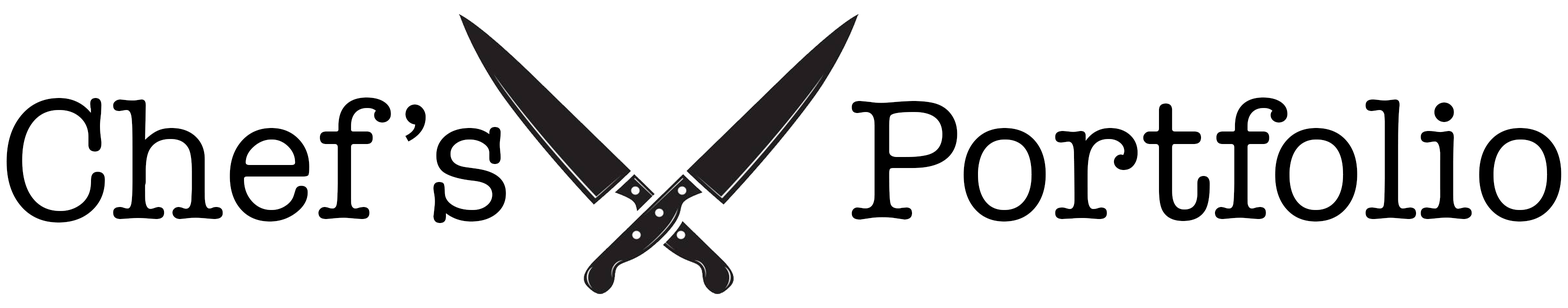
<style>
.page{position:relative;width:1568px;height:308px;background:#ffffff}
.page>*{position:absolute;margin:0}
.t1{font:175px "AmericanTypewriter";color:#000000}
.t2{font:162.5px "AndaleMono";letter-spacing:-0.08em;color:#000000}
.t3{font:175px "AmericanTypewriter";letter-spacing:-0.08em;color:#000000}
</style>
<div class="page">
<p class="t1" style="left:6px;top:98px;width:1556px;height:125px">Chef<span class="t2">’</span><span class="t3">s</span>        Portfolio</p>
</div>
